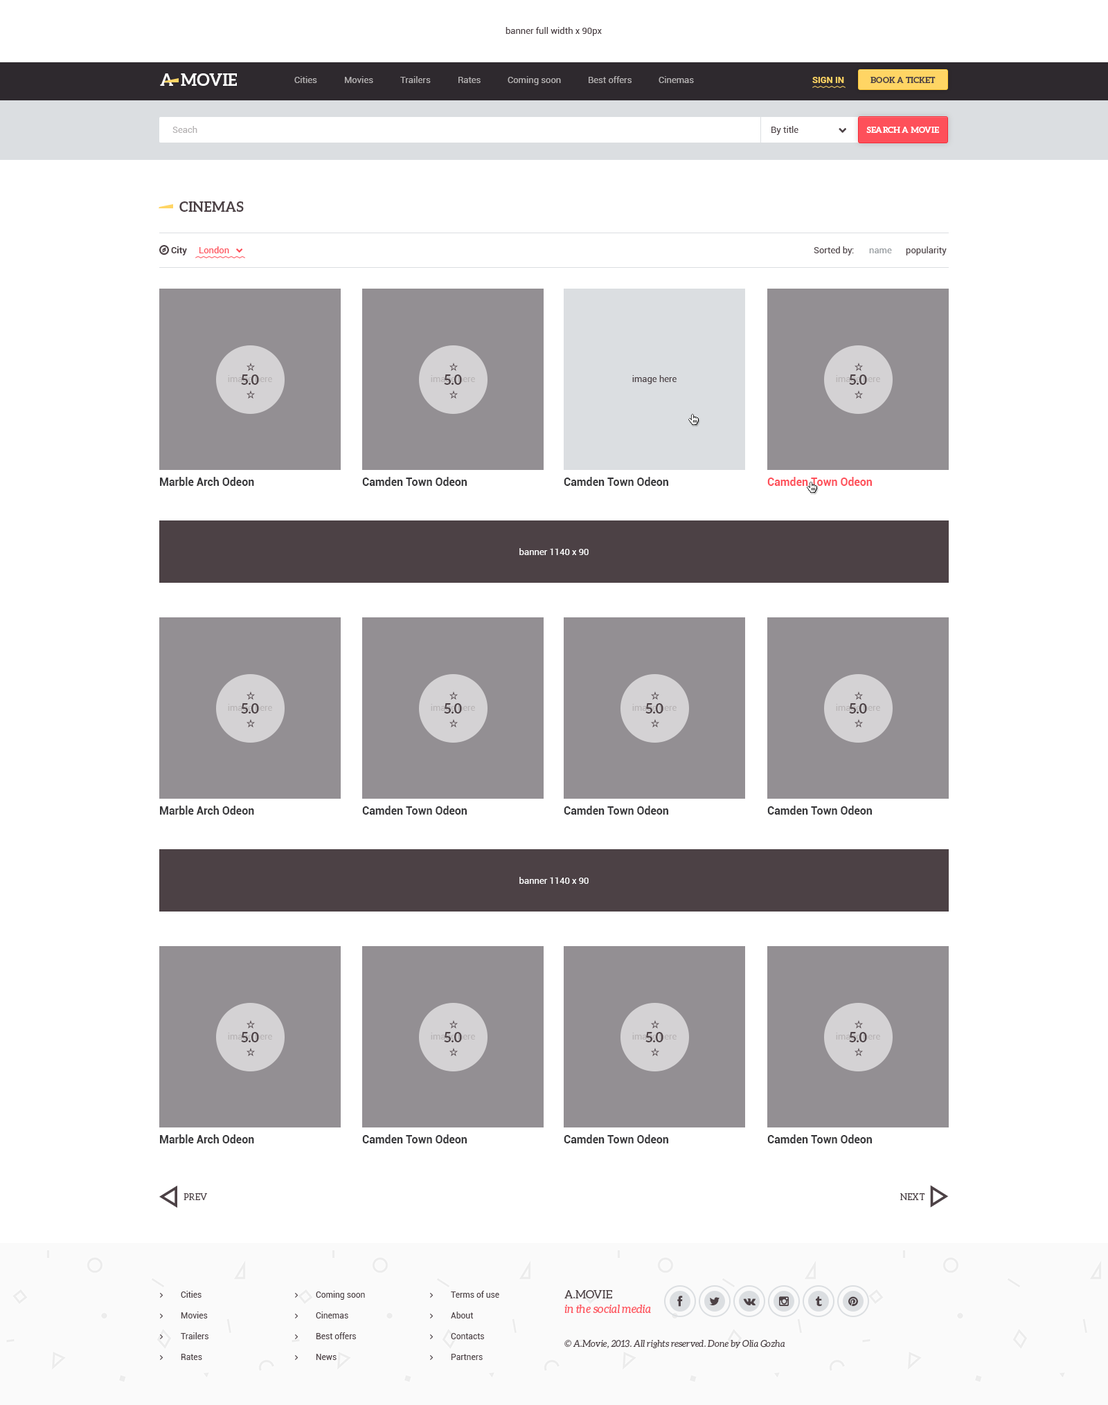
<style>
.page{position:relative;width:1108px;height:1405px;background:#ffffff}
.page>*{position:absolute;margin:0}
.t1{font:9px "Roboto-Regular";color:#4c4145}
.t2{font:16.6px "Aleo-Bold";color:#ffffff;text-transform:uppercase}
.t3{font:9px "Roboto-Regular";color:#b4b1b2}
.t4{font:9px "Roboto-Bold";color:#ffd564;text-transform:uppercase}
.t5{font:8.3px "Aleo-Bold";color:#4c4145;text-transform:uppercase}
.t6{font:8.3px "Aleo-Bold";color:#ffffff;text-transform:uppercase}
.t7{font:13.8px "Aleo-Bold";color:#4c4145;text-transform:uppercase}
.t8{font:9px "Roboto-Bold";color:#4c4145}
.t9{font:9px "Roboto-Regular";color:#fe505a}
.t10{font:9px "Roboto-Regular";color:#969b9f}
.t11{font:11.1px "Roboto-Bold";color:#363639}
.t12{font:11.1px "Roboto-Bold";color:#fe505a}
.t13{font:9px "Roboto-Regular";color:#ffffff}
.t14{font:9px "Aleo-Regular";color:#4c4145;text-transform:uppercase}
.t15{font:8.3px "Roboto-Regular";color:#4c4145}
.t16{font:11.1px/14.5px "Aleo-Italic";color:#fe505a}
.t17{font:11.1px/14.5px "Aleo-Regular";color:#4c4145;text-transform:uppercase}
.t18{font:9px "Aleo-Italic";color:#4c4145}
</style>
<div class="page">
<p class="t1" style="left:505px;top:27px;width:97px;height:9px">banner full width x 90px</p>
<p class="t2" style="left:160px;top:73px;width:13px;height:13px">A</p>
<p class="t2" style="left:181px;top:73px;width:56px;height:13px">movie</p>
<p class="t3" style="left:294px;top:76px;width:23px;height:7px">Cities</p>
<p class="t3" style="left:345px;top:76px;width:28px;height:7px">Movies</p>
<p class="t3" style="left:400px;top:76px;width:31px;height:7px">Trailers</p>
<p class="t3" style="left:458px;top:77px;width:22px;height:6px">Rates</p>
<p class="t3" style="left:507px;top:76px;width:54px;height:9px">Coming soon</p>
<p class="t3" style="left:588px;top:76px;width:43px;height:7px">Best offers</p>
<p class="t3" style="left:658px;top:76px;width:36px;height:7px">Cinemas</p>
<p class="t4" style="left:812px;top:77px;width:32px;height:6px">Sign in</p>
<p class="t5" style="left:870px;top:77px;width:65px;height:6px">Book a ticket</p>
<p class="t3" style="left:172px;top:126px;width:25px;height:7px">Seach</p>
<p class="t1" style="left:771px;top:126px;width:27px;height:9px">By title</p>
<p class="t6" style="left:866px;top:127px;width:73px;height:6px">search a movie</p>
<p class="t7" style="left:179px;top:201px;width:65px;height:11px">cinemas</p>
<p class="t8" style="left:171px;top:246px;width:16px;height:9px">City</p>
<p class="t9" style="left:199px;top:246px;width:30px;height:7px">London</p>
<p class="t1" style="left:813px;top:246px;width:41px;height:9px">Sorted by:</p>
<p class="t10" style="left:869px;top:249px;width:23px;height:4px">name</p>
<p class="t1" style="left:906px;top:246px;width:40px;height:9px">popularity</p>
<p class="t7" style="left:241px;top:375px;width:18px;height:10px">5.0</p>
<p class="t7" style="left:444px;top:375px;width:18px;height:10px">5.0</p>
<p class="t1" style="left:632px;top:375px;width:44px;height:9px">image here</p>
<p class="t7" style="left:849px;top:375px;width:18px;height:10px">5.0</p>
<p class="t11" style="left:160px;top:477px;width:94px;height:9px">Marble Arch Odeon</p>
<p class="t11" style="left:362px;top:477px;width:105px;height:9px">Camden Town Odeon</p>
<p class="t11" style="left:564px;top:477px;width:104px;height:9px">Camden Town Odeon</p>
<p class="t12" style="left:767px;top:477px;width:105px;height:9px">Camden Town Odeon</p>
<p class="t13" style="left:519px;top:548px;width:69px;height:7px">banner 1140 x 90</p>
<p class="t7" style="left:241px;top:703px;width:18px;height:11px">5.0</p>
<p class="t7" style="left:444px;top:703px;width:18px;height:11px">5.0</p>
<p class="t7" style="left:645px;top:703px;width:18px;height:11px">5.0</p>
<p class="t7" style="left:849px;top:703px;width:18px;height:11px">5.0</p>
<p class="t11" style="left:160px;top:806px;width:94px;height:9px">Marble Arch Odeon</p>
<p class="t11" style="left:362px;top:806px;width:105px;height:9px">Camden Town Odeon</p>
<p class="t11" style="left:564px;top:806px;width:104px;height:9px">Camden Town Odeon</p>
<p class="t11" style="left:767px;top:806px;width:105px;height:9px">Camden Town Odeon</p>
<p class="t13" style="left:519px;top:877px;width:69px;height:7px">banner 1140 x 90</p>
<p class="t7" style="left:241px;top:1032px;width:18px;height:11px">5.0</p>
<p class="t7" style="left:444px;top:1032px;width:18px;height:11px">5.0</p>
<p class="t7" style="left:645px;top:1032px;width:18px;height:11px">5.0</p>
<p class="t7" style="left:849px;top:1032px;width:18px;height:11px">5.0</p>
<p class="t11" style="left:160px;top:1135px;width:94px;height:9px">Marble Arch Odeon</p>
<p class="t11" style="left:362px;top:1135px;width:105px;height:9px">Camden Town Odeon</p>
<p class="t11" style="left:564px;top:1135px;width:104px;height:9px">Camden Town Odeon</p>
<p class="t11" style="left:767px;top:1135px;width:105px;height:9px">Camden Town Odeon</p>
<p class="t14" style="left:183px;top:1194px;width:24px;height:6px">prev</p>
<p class="t14" style="left:900px;top:1194px;width:25px;height:6px">next</p>
<p class="t15" style="left:181px;top:1291px;width:20px;height:7px">Cities</p>
<p class="t15" style="left:316px;top:1291px;width:49px;height:9px">Coming soon</p>
<p class="t15" style="left:451px;top:1291px;width:48px;height:7px">Terms of use</p>
<p class="t16" style="left:564px;top:1290px;width:87px;height:24px"><span class="t17">A.Movie <br></span>in the social media</p>
<p class="t15" style="left:181px;top:1312px;width:27px;height:7px">Movies</p>
<p class="t15" style="left:316px;top:1312px;width:32px;height:7px">Cinemas</p>
<p class="t15" style="left:451px;top:1312px;width:23px;height:7px">About</p>
<p class="t15" style="left:181px;top:1333px;width:27px;height:7px">Trailers</p>
<p class="t15" style="left:316px;top:1333px;width:40px;height:7px">Best offers</p>
<p class="t15" style="left:451px;top:1333px;width:33px;height:7px">Contacts</p>
<p class="t18" style="left:564px;top:1340px;width:221px;height:9px">© A.Movie, 2013. All rights reserved. Done by Olia Gozha</p>
<p class="t15" style="left:181px;top:1354px;width:21px;height:6px">Rates</p>
<p class="t15" style="left:316px;top:1354px;width:20px;height:6px">News</p>
<p class="t15" style="left:451px;top:1354px;width:32px;height:6px">Partners</p>
</div>
